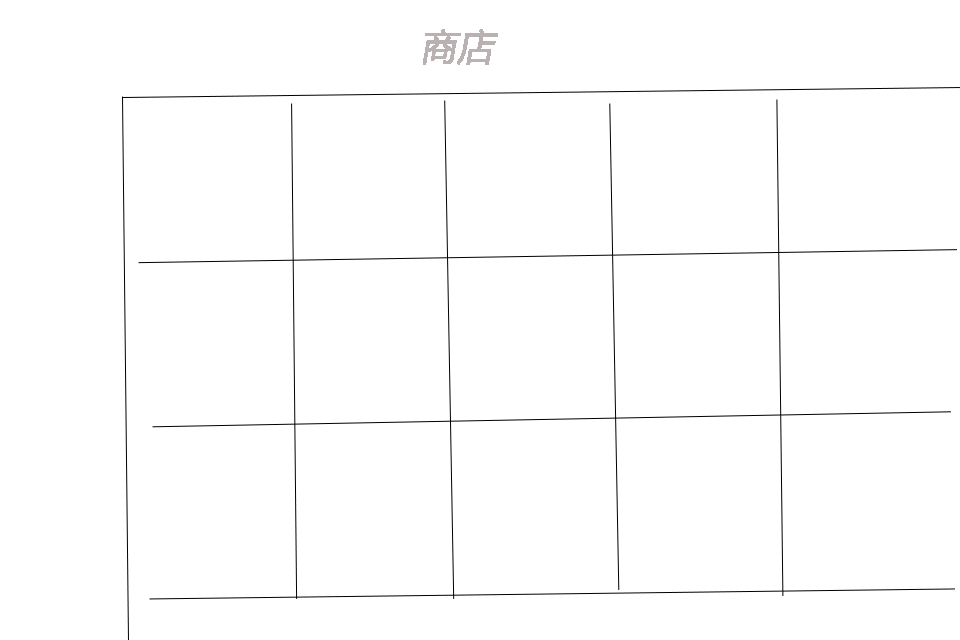
<style>
.page{position:relative;width:960px;height:640px;background:#ffffff}
.page>*{position:absolute;margin:0}
.t1{font:36px "MicrosoftYaHei";color:#bab2b2;font-weight:bold;font-style:italic}
</style>
<div class="page">
<p class="t1" style="left:423px;top:29px;width:75px;height:36px">商店</p>
</div>
